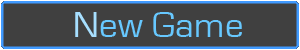
<style>
.page{position:relative;width:300px;height:50px;background:#404040}
.page>*{position:absolute;margin:0}
.t1{font:37.4px "EurostileRegular";color:#67c8ff}
.t2{font:37.4px "EurostileRegular";color:#a7dfff}
</style>
<div class="page">
<p class="t1" style="left:75px;top:12px;width:167px;height:25px"><span class="t2">N</span>ew Game</p>
</div>
